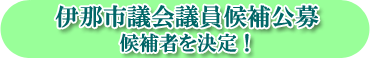
<style>
.page{position:relative;width:370px;height:58px;background:#99ff99}
.page>*{position:absolute;margin:0}
.t1{font:24px "HGPMinchoE";color:#006666}
.t2{font:20px "HGPMinchoE";color:#006666}
</style>
<div class="page">
<p class="t1" style="left:55px;top:5px;width:264px;height:23px">伊那市議会議員候補公募</p>
<p class="t2" style="left:120px;top:33px;width:129px;height:20px">候補者を決定！</p>
</div>
